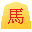
<style>
.page{position:relative;width:32px;height:32px;background:#ffffff}
.page>*{position:absolute;margin:0}
.t1{font:18px "BIZ-UDMincho-Medium";letter-spacing:-0.075em;color:#f02218}
</style>
<div class="page">
<p class="t1" style="left:8px;top:8px;width:16px;height:16px">馬</p>
</div>
